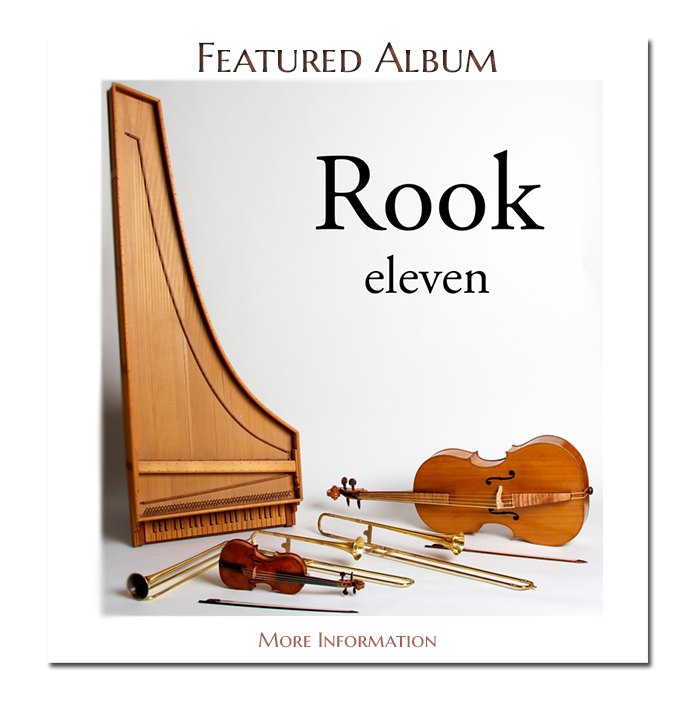
<style>
.page{position:relative;width:700px;height:701px;background:#ffffff}
.page>*{position:absolute;margin:0}
.t1{font:41.7px "MarcellusSC-Regular"}
.t2{font:20.8px "MarcellusSC-Regular";color:#a4624b}
</style>
<div class="page">
<p class="t1" style="left:199px;top:42px;width:298px;height:31px">Featured Album</p>
<p class="t2" style="left:258px;top:632px;width:178px;height:16px">More Information</p>
</div>
